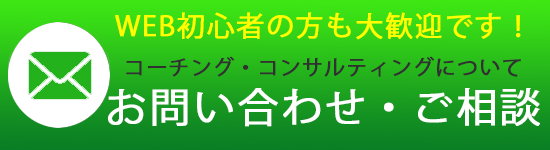
<style>
.page{position:relative;width:550px;height:150px}
.page>*{position:absolute;margin:0}
.t1{font:20.6px/29px "KozGoPr6N-Regular";letter-spacing:0.05em;color:#313131;font-weight:bold}
.t2{font:27.6px/44.9px "KozGoPr6N-Regular";letter-spacing:0.05em;color:#ffff00;font-weight:bold}
.t3{font:40.6px/29px "KozGoPr6N-Regular";letter-spacing:0.05em;color:#ffffff;font-weight:bold}
</style>
<div class="page">
<p class="t1" style="left:108px;top:12px;width:432px;height:115px;text-align:center"><span class="t2">WEB初心者の方も大歓迎です！<br></span>コーチング・コンサルティングについて<br><span class="t3">お問い合わせ・ご相談</span></p>
</div>
